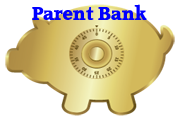
<style>
.page{position:relative;width:180px;height:120px;background:#ffffff}
.page>*{position:absolute;margin:0}
.t1{font:17.9px "AccordHeavySFBold";color:#0000ff}
</style>
<div class="page">
<p class="t1" style="left:32px;top:4px;width:115px;height:16px">Parent Bank</p>
</div>
